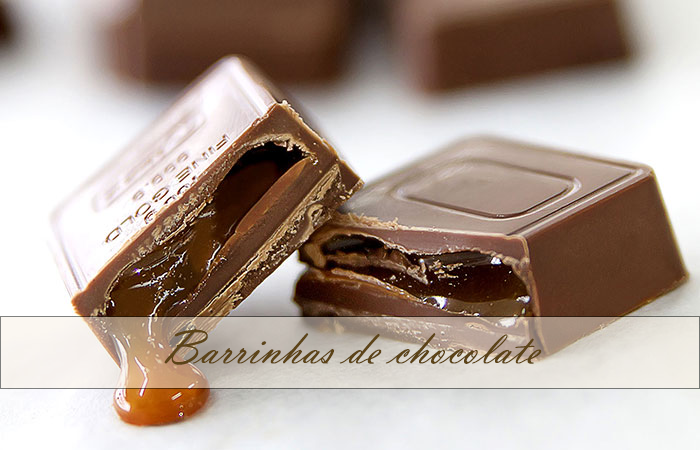
<style>
.page{position:relative;width:700px;height:450px}
.page>*{position:absolute;margin:0}
.t1{font:50px "VladimirScript";color:#5c4317}
</style>
<div class="page">
<p class="t1" style="left:164px;top:328px;width:378px;height:37px">Barrinhas de chocolate</p>
</div>
